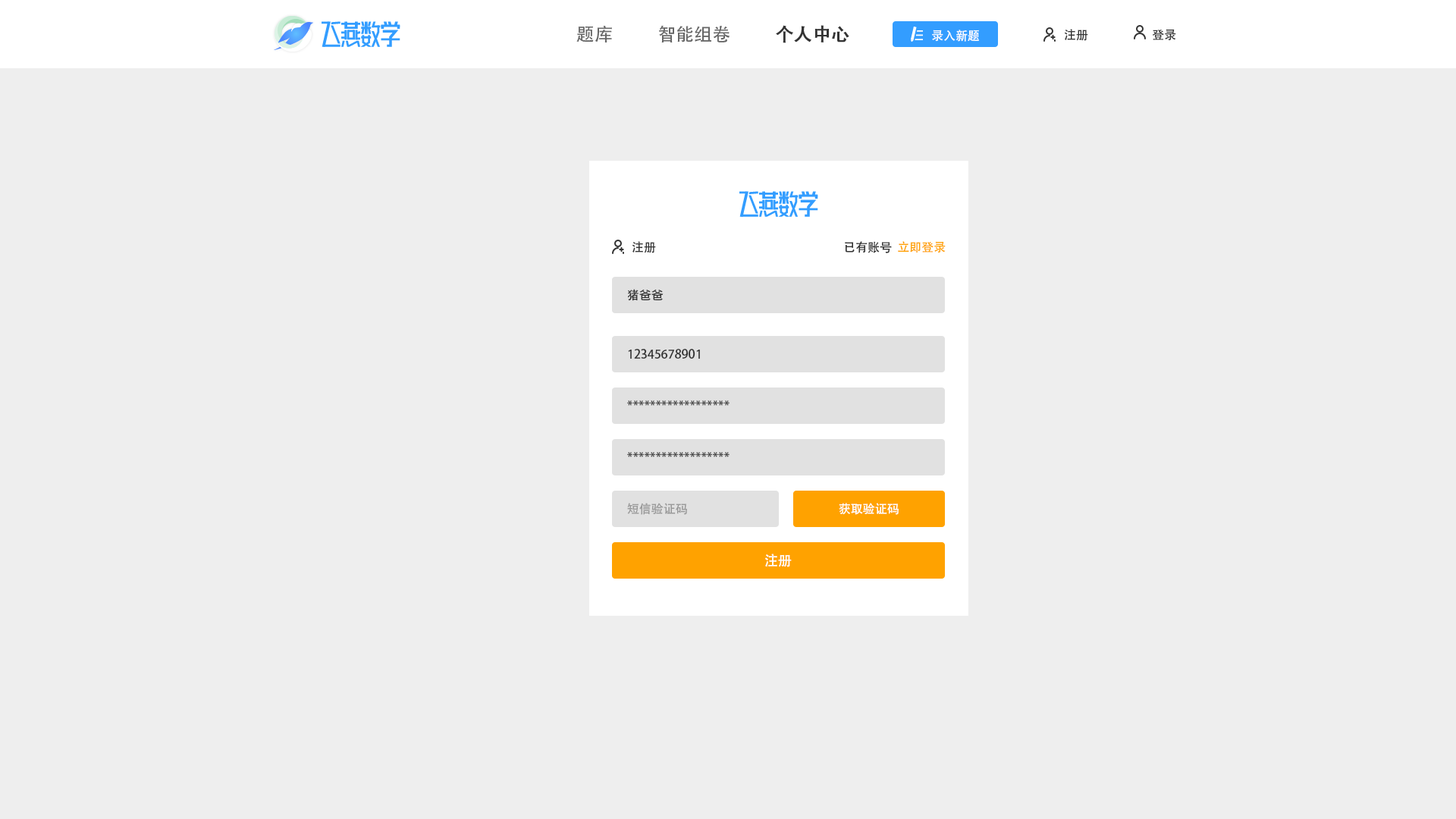
<style>
.page{position:relative;width:1456px;height:819px;background:#eeeeee}
.page>*{position:absolute;margin:0}
.t1{font:18.2px "AdobeHeitiStd-Regular";color:#666666}
.t2{font:18.2px "AdobeHeitiStd-Regular";color:#333333;font-weight:bold}
.t3{font:12.1px "AdobeHeitiStd-Regular";color:#ffffff}
.t4{font:12.1px "AdobeHeitiStd-Regular";color:#333333}
.t5{font:12.1px "AdobeHeitiStd-Regular";color:#ffa200}
.t6{font:12.1px "AdobeHeitiStd-Regular";color:#999999}
.t7{font:13.6px "AdobeHeitiStd-Regular";color:#ffffff}
</style>
<div class="page">
<p class="t1" style="left:576px;top:26px;width:36px;height:16px">题库</p>
<p class="t1" style="left:659px;top:25px;width:71px;height:17px">智能组卷</p>
<p class="t2" style="left:776px;top:25px;width:73px;height:18px">个人中心</p>
<p class="t3" style="left:932px;top:30px;width:47px;height:12px">录入新题</p>
<p class="t4" style="left:1064px;top:29px;width:24px;height:12px">注册</p>
<p class="t4" style="left:1152px;top:29px;width:24px;height:12px">登录</p>
<p class="t4" style="left:632px;top:241px;width:24px;height:12px">注册</p>
<p class="t4" style="left:845px;top:241px;width:101px;height:12px">已有账号  <span class="t5">立即登录</span></p>
<p class="t4" style="left:627px;top:289px;width:37px;height:12px">猪爸爸</p>
<p class="t4" style="left:628px;top:349px;width:72px;height:10px">12345678901</p>
<p class="t4" style="left:627px;top:400px;width:103px;height:6px">******************</p>
<p class="t4" style="left:627px;top:452px;width:103px;height:5px">******************</p>
<p class="t6" style="left:627px;top:503px;width:60px;height:12px">短信验证码</p>
<p class="t3" style="left:839px;top:503px;width:60px;height:12px">获取验证码</p>
<p class="t7" style="left:765px;top:554px;width:27px;height:13px">注册</p>
</div>
